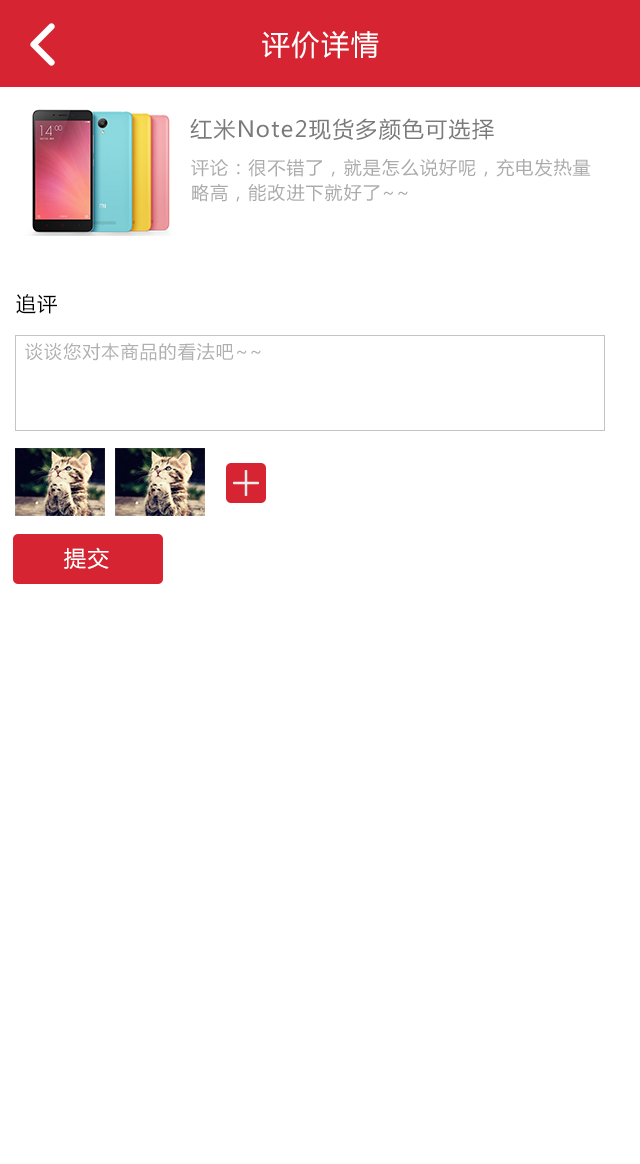
<style>
.page{position:relative;width:640px;height:1164px;background:#ffffff}
.page>*{position:absolute;margin:0}
.t1{font:28px "MicrosoftYaHei";letter-spacing:0.06em;color:#ffffff}
.t2{font:22px "MicrosoftYaHei";letter-spacing:0.06em;color:#7a7a7a}
.t3{font:18px/25px "MicrosoftYaHei";letter-spacing:0.06em;color:#ababab}
.t4{font:20px "MicrosoftYaHei";letter-spacing:0.06em;color:#000000}
.t5{font:18px "MicrosoftYaHei";letter-spacing:0.06em;color:#b0b0b0}
.t6{font:22px "MicrosoftYaHei";letter-spacing:0.06em;color:#ffffff}
</style>
<div class="page">
<p class="t1" style="left:262px;top:31px;width:117px;height:28px">评价详情</p>
<p class="t2" style="left:190px;top:118px;width:304px;height:23px">红米Note2现货多颜色可选择</p>
<p class="t3" style="left:191px;top:158px;width:400px;height:44px">评论：很不错了，就是怎么说好呢，充电发热量<br>略高，能改进下就好了~~</p>
<p class="t4" style="left:16px;top:294px;width:41px;height:20px">追评</p>
<p class="t5" style="left:25px;top:343px;width:236px;height:18px">谈谈您对本商品的看法吧~~</p>
<p class="t6" style="left:64px;top:547px;width:45px;height:22px">提交</p>
</div>
